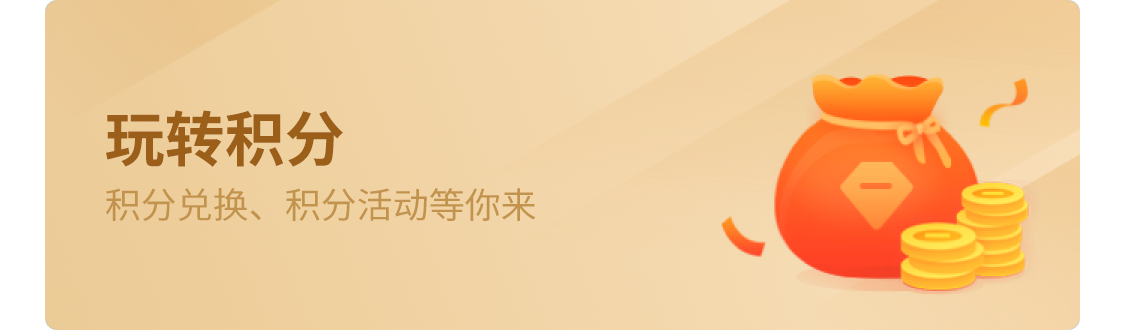
<style>
.page{position:relative;width:1125px;height:330px}
.page>*{position:absolute;margin:0}
.t1{font:60px "SourceHanSansCN-Bold";color:#9c5f19}
.t2{font:36px "SourceHanSansCN-Regular";color:#c2934c}
</style>
<div class="page">
<p class="t1" style="left:106px;top:110px;width:237px;height:57px">玩转积分</p>
<p class="t2" style="left:106px;top:188px;width:430px;height:33px">积分兑换、积分活动等你来</p>
</div>
